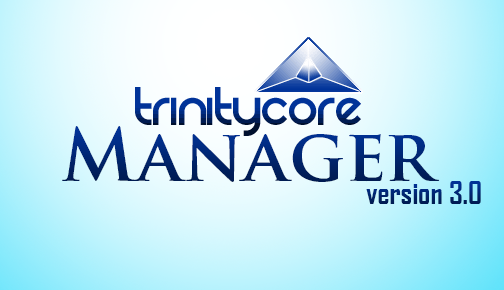
<style>
.page{position:relative;width:504px;height:290px}
.page>*{position:absolute;margin:0}
.t1{font:72px "TrajanPro-Bold"}
.t2{font:30px "AgencyFB-Bold"}
</style>
<div class="page">
<p class="t1" style="left:62px;top:126px;width:378px;height:56px">Manager</p>
<p class="t2" style="left:366px;top:181px;width:115px;height:23px">version 3.0</p>
</div>
